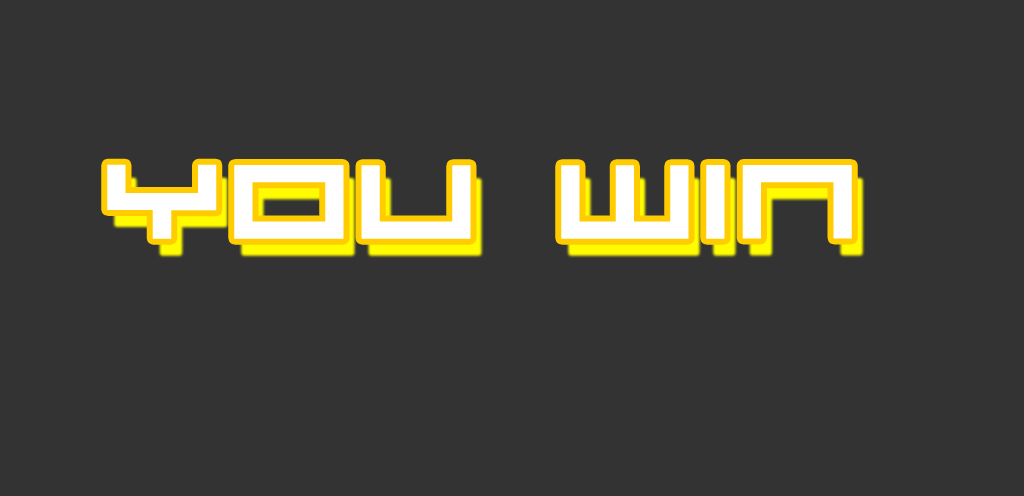
<style>
.page{position:relative;width:1024px;height:496px;background:#333333}
.page>*{position:absolute;margin:0}
.t1{font:151.3px "Kunstware-Alphabet";color:#ffffff}
</style>
<div class="page">
<p class="t1" style="left:107px;top:164px;width:745px;height:75px">YOU WIN</p>
</div>
